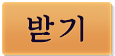
<style>
.page{position:relative;width:115px;height:56px}
.page>*{position:absolute;margin:0}
.t1{font:31px "SDKukdetopokki-aLt";letter-spacing:0.12em;color:#10052a}
</style>
<div class="page">
<p class="t1" style="left:27px;top:14px;width:57px;height:29px">받기</p>
</div>
